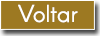
<style>
.page{position:relative;width:100px;height:36px;background:#9d7922}
.page>*{position:absolute;margin:0}
.t1{font:24px "Arcon-Regular";color:#ffffff}
</style>
<div class="page">
<p class="t1" style="left:18px;top:4px;width:60px;height:19px">Voltar</p>
</div>
